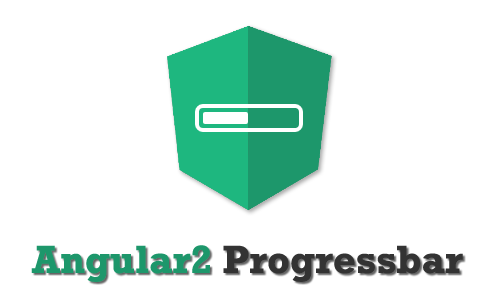
<style>
.page{position:relative;width:500px;height:300px;background:#ffffff}
.page>*{position:absolute;margin:0}
.t1{font:40px "Rockwell-Bold";color:#333333}
.t2{font:40px "Rockwell-Bold";color:#1d976b}
</style>
<div class="page">
<p class="t1" style="left:31px;top:245px;width:432px;height:37px"><span class="t2">Angular2 </span>Progressbar</p>
</div>
